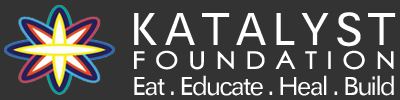
<style>
.page{position:relative;width:400px;height:100px;background:#333333}
.page>*{position:absolute;margin:0}
.t1{font:48px "SIL-Hei-Med-Jian";letter-spacing:0.06em;color:#ffffff}
.t2{font:24px "STHeitiTC-Medium";letter-spacing:0.358em;color:#ffffff;scale:1.13 1}
.t3{font:27px "SIL-Hei-Med-Jian";letter-spacing:-0.1em;color:#ffffff}
</style>
<div class="page">
<p class="t1" style="left:134px;top:12px;width:262px;height:35px">KATALYST</p>
<p class="t2" style="left:134px;top:50px;width:260px;height:20px">FOUNDATION</p>
<p class="t3" style="left:134px;top:75px;width:260px;height:21px">Eat . Educate . Heal . Build</p>
</div>
